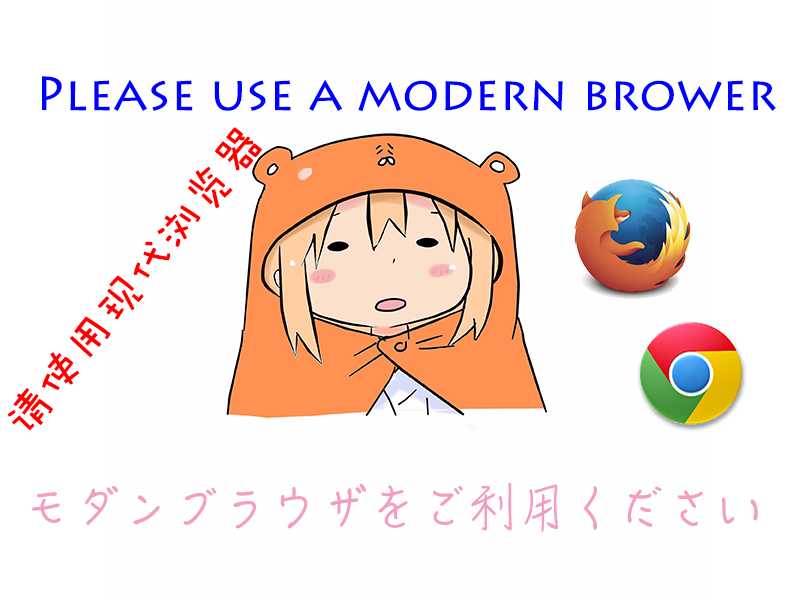
<style>
.page{position:relative;width:800px;height:600px;background:#fefefe}
.page>*{position:absolute;margin:0}
.t1{font:48px "LithosPro-Regular";color:#0000ff}
.t2{font:48px "DFWaWaSC-W5";color:#ff0000}
.t3{font:48px "HanziPenTC-W3";color:#f19ec2}
</style>
<div class="page">
<p class="t1" style="left:42px;top:76px;width:734px;height:36px">Please use a modern brower</p>
<p class="t2" style="left:7px;top:127px;width:255px;height:304px;rotate:-51deg">请使用现代浏览器</p>
<p class="t3" style="left:32px;top:482px;width:726px;height:50px">モダンブラウザをご利用ください</p>
</div>
